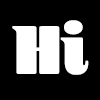
<style>
.page{position:relative;width:100px;height:100px;background:#000000}
.page>*{position:absolute;margin:0}
.t1{font:72px "Blenny-Black";color:#ffffff}
</style>
<div class="page">
<p class="t1" style="left:12px;top:20px;width:77px;height:55px">Hi</p>
</div>
